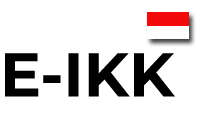
<style>
.page{position:relative;width:198px;height:138px;background:#ffffff}
.page>*{position:absolute;margin:0}
.t1{font:61.8px "Montserrat-Bold";color:#000000}
</style>
<div class="page">
<p class="t1" style="left:5px;top:53px;width:170px;height:44px">E-IKK</p>
</div>
